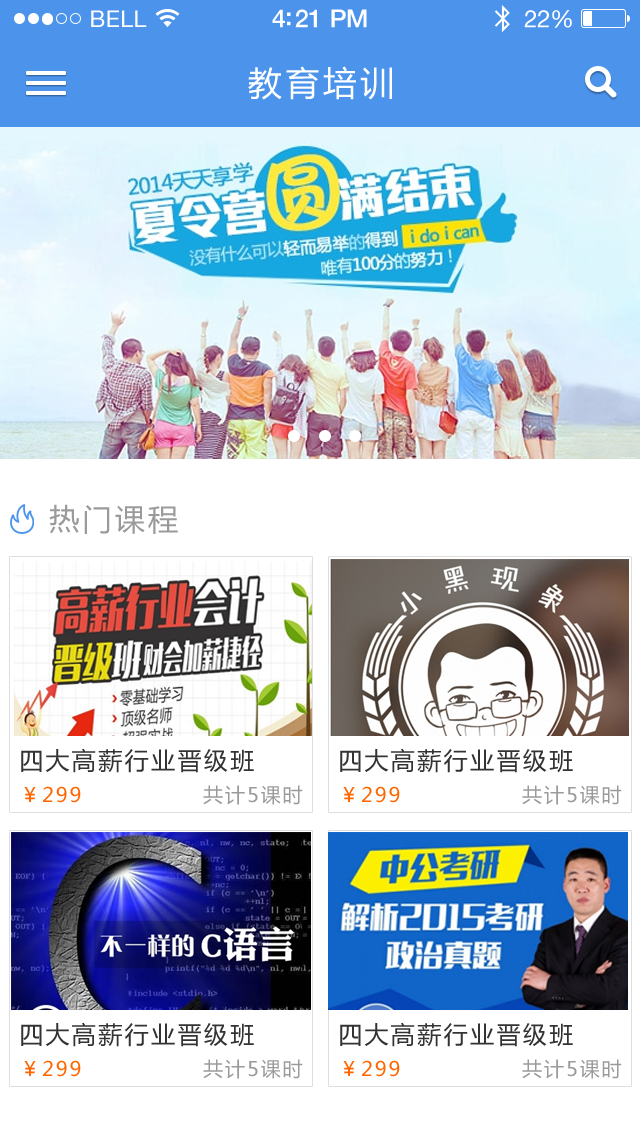
<style>
.page{position:relative;width:640px;height:1136px;background:#ffffff}
.page>*{position:absolute;margin:0}
.t1{font:23px "HelveticaNeue";letter-spacing:0.02em;color:#ffffff}
.t2{font:25px "HelveticaNeue-Medium";letter-spacing:-0.02em;color:#ffffff}
.t3{font:24px "HelveticaNeue";letter-spacing:-0.02em;color:#ffffff}
.t4{font:34px "MicrosoftYaHei";letter-spacing:0.1em;color:#ffffff}
.t5{font:30px "MicrosoftYaHei";letter-spacing:0.1em;color:#9a9a9a}
.t6{font:24px "MicrosoftYaHei";letter-spacing:0.1em;color:#333333}
.t7{font:20px "MicrosoftYaHei";letter-spacing:0.1em;color:#9a9a9a}
.t8{font:20px "MicrosoftYaHei";letter-spacing:0.1em;color:#ff6600}
</style>
<div class="page">
<p class="t1" style="left:91px;top:10px;width:56px;height:17px">BELL</p>
<p class="t2" style="left:272px;top:9px;width:95px;height:19px">4:21 PM</p>
<p class="t3" style="left:524px;top:10px;width:48px;height:18px">22%</p>
<p class="t4" style="left:248px;top:66px;width:144px;height:34px">教育培训</p>
<p class="t5" style="left:49px;top:504px;width:129px;height:30px">热门课程</p>
<p class="t6" style="left:21px;top:748px;width:233px;height:25px">四大高薪行业晋级班</p>
<p class="t6" style="left:340px;top:748px;width:233px;height:25px">四大高薪行业晋级班</p>
<p class="t7" style="left:203px;top:785px;width:100px;height:20px">共计5课时</p>
<p class="t7" style="left:522px;top:785px;width:100px;height:20px">共计5课时</p>
<p class="t8" style="left:24px;top:786px;width:57px;height:17px">￥299</p>
<p class="t8" style="left:343px;top:786px;width:57px;height:17px">￥299</p>
<p class="t6" style="left:21px;top:1022px;width:233px;height:25px">四大高薪行业晋级班</p>
<p class="t6" style="left:340px;top:1022px;width:233px;height:25px">四大高薪行业晋级班</p>
<p class="t8" style="left:24px;top:1060px;width:57px;height:17px">￥299</p>
<p class="t7" style="left:203px;top:1059px;width:100px;height:20px">共计5课时</p>
<p class="t8" style="left:343px;top:1060px;width:57px;height:17px">￥299</p>
<p class="t7" style="left:522px;top:1059px;width:100px;height:20px">共计5课时</p>
</div>
